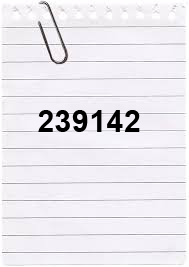
<style>
.page{position:relative;width:189px;height:267px}
.page>*{position:absolute;margin:0}
.t1{font:30px "Arial-BoldMT";letter-spacing:0.02em;color:#000000}
.t2{font:18px "Arial-BoldMT";letter-spacing:0.02em;color:#3325f6}
</style>
<div class="page">
<p class="t1" style="left:38px;top:110px;width:102px;height:22px"><span class="t2">    </span>239142</p>
</div>
